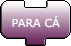
<style>
.page{position:relative;width:71px;height:46px}
.page>*{position:absolute;margin:0}
.t1{font:11px "Verdana";color:#ffffff}
</style>
<div class="page">
<p class="t1" style="left:12px;top:16px;width:48px;height:12px">PARA CÁ</p>
</div>
